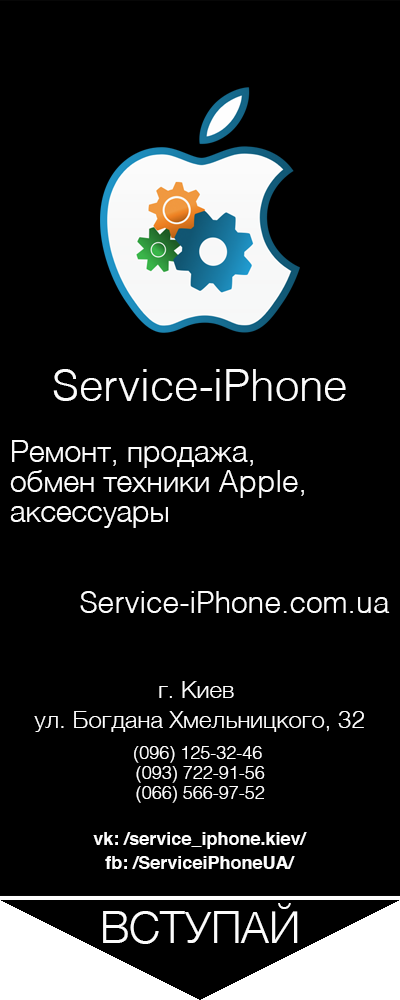
<style>
.page{position:relative;width:400px;height:1000px;background:#000000}
.page>*{position:absolute;margin:0}
.t1{font:44px "Helvetica-Light";color:#fcfcfc}
.t2{font:30px/30px "Helvetica-Light";color:#fcfcfc}
.t3{font:30px "Helvetica-Light";color:#fcfcfc}
.t4{font:24px/30px "Helvetica-Light";color:#fcfcfc}
.t5{font:18px/20px "Helvetica-Light";color:#fcfcfc}
.t6{font:18px/24px "Helvetica-Bold";color:#fcfcfc}
</style>
<div class="page">
<p class="t1" style="left:53px;top:369px;width:293px;height:32px">Service-iPhone</p>
<p class="t2" style="left:10px;top:440px;width:294px;height:88px">Ремонт, продажа, <br>обмен техники Apple,<br>аксессуары</p>
<p class="t3" style="left:80px;top:591px;width:310px;height:22px">Service-iPhone.com.ua</p>
<p class="t4" style="left:34px;top:681px;width:330px;height:51px;text-align:center">г. Киев <br>ул. Богдана Хмельницкого, 32</p>
<p class="t5" style="left:134px;top:746px;width:131px;height:57px;text-align:center">(096) 125-32-46 <br>(093) 722-91-56<br>(066) 566-97-52</p>
<p class="t6" style="left:93px;top:832px;width:214px;height:37px;text-align:center">vk: /service_iphone.kiev/<br>fb: /ServiceiPhoneUA/</p>
<p class="t1" style="left:103px;top:903px;width:195px;height:41px">ВСТУПАЙ</p>
</div>
